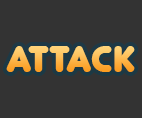
<style>
.page{position:relative;width:142px;height:118px;background:#333333}
.page>*{position:absolute;margin:0}
.t1{font:44px "Junegull"}
</style>
<div class="page">
<p class="t1" style="left:6px;top:46px;width:129px;height:26px">ATTACK</p>
</div>
